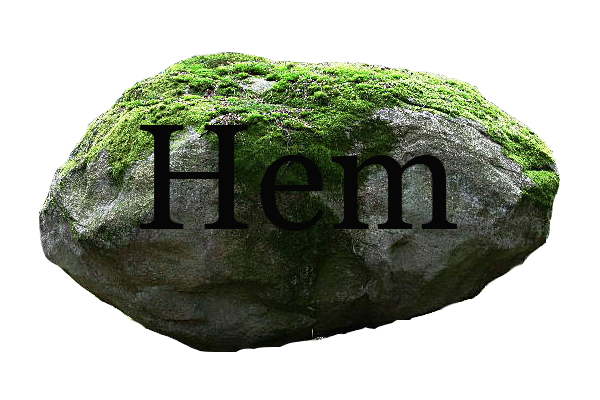
<style>
.page{position:relative;width:600px;height:400px;background:#ffffff}
.page>*{position:absolute;margin:0}
.t1{font:150px "Georgia";color:#060606}
</style>
<div class="page">
<p class="t1" style="left:140px;top:125px;width:317px;height:106px">Hem</p>
</div>
